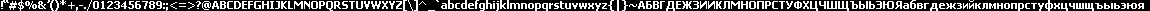
<style>
.page{position:relative;width:1150px;height:11px;background:#000000}
.page>*{position:absolute;margin:0}
.t1{font:11px "Tahoma-Bold";color:#ffffff}
</style>
<div class="page">
<p class="t1" style="left:1px;top:0px;width:1143px;height:11px">!“#$%&amp;’()*+,-./0123456789:;&lt;=&gt;?@ABCDEFGHIJKLMNOPQRSTUVWXYZ[\]^_`abcdefghijklmnopqrstuvwxyz{|}~АБВГДЕЖЗИЙКЛМНОПРСТУФХЦЧШЩЪЫЬЭЮЯабвгдежзийклмнопрстуфхцчшщъыьэюя</p>
</div>
